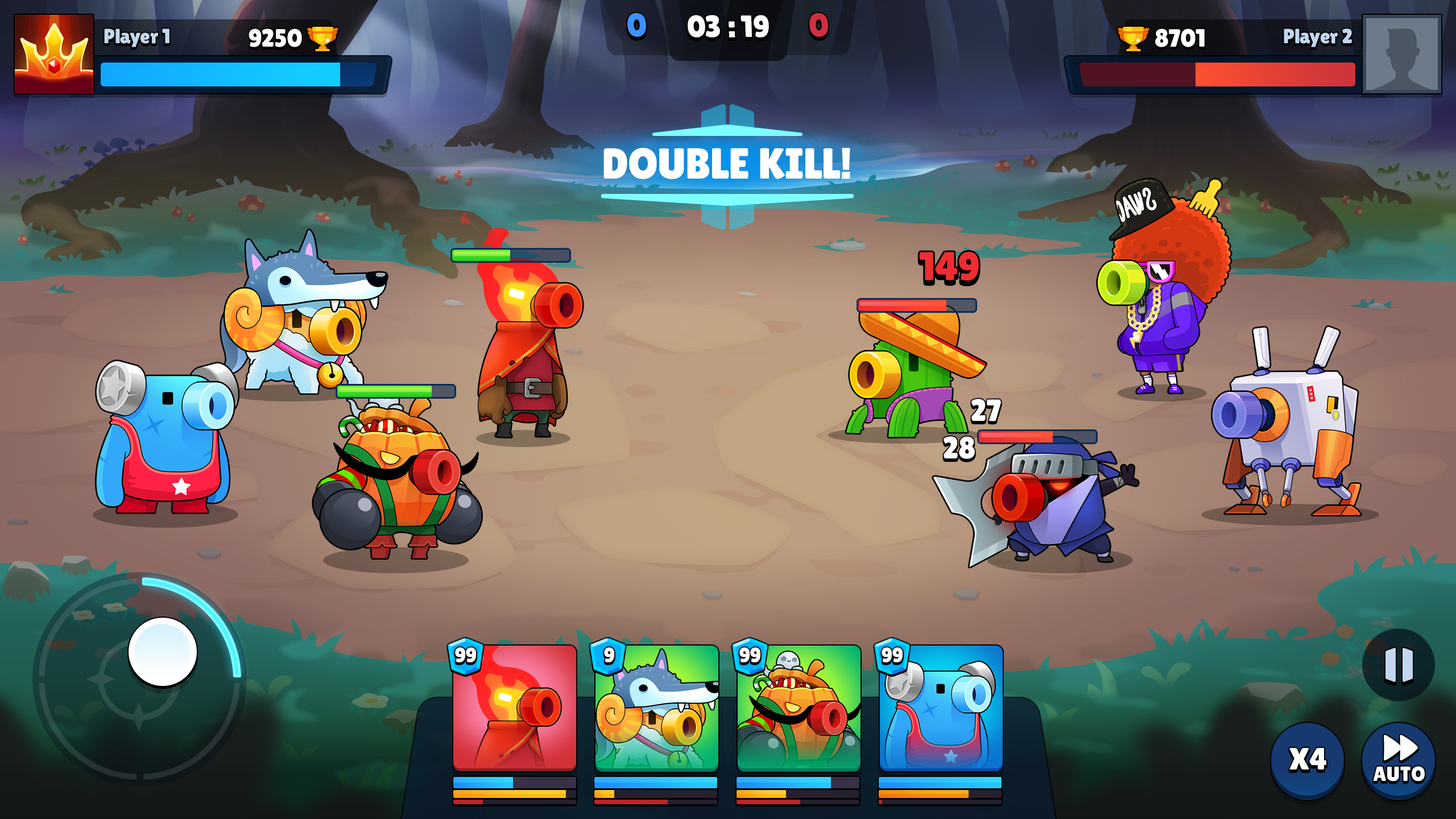
<style>
.page{position:relative;width:1456px;height:819px}
.page>*{position:absolute;margin:0}
.t1{font:33px "LilitaOne";color:#3c91fc;text-transform:uppercase}
.t2{font:30.7px "LilitaOne";color:#ffffff;text-transform:uppercase}
.t3{font:33px "LilitaOne";color:#d12e41;text-transform:uppercase}
.t4{font:20.5px "LilitaOne";color:#c3d7ef}
.t5{font:25px "LilitaOne";color:#ffffff}
.t6{font:43.2px "LilitaOne";color:#ffffff;text-transform:uppercase}
.t7{font:39.8px "LilitaOne";color:#ef2d31}
.t8{font:30.7px "LilitaOne";color:#ffffff}
.t9{font:20.5px "LilitaOne";color:#ffffff;text-transform:uppercase}
.t10{font:20.5px "LilitaOne";color:#ffffff}
</style>
<div class="page">
<p class="t1" style="left:627px;top:13px;width:19px;height:24px">0</p>
<p class="t2" style="left:688px;top:15px;width:81px;height:23px">03 : 19</p>
<p class="t3" style="left:809px;top:13px;width:19px;height:24px">0</p>
<p class="t4" style="left:104px;top:28px;width:65px;height:19px">Player 1</p>
<p class="t5" style="left:249px;top:28px;width:53px;height:19px">9250</p>
<p class="t5" style="left:1155px;top:28px;width:50px;height:19px">8701</p>
<p class="t4" style="left:1284px;top:28px;width:68px;height:19px">Player 2</p>
<p class="t6" style="left:603px;top:148px;width:247px;height:31px">Double kill!</p>
<p class="t7" style="left:919px;top:251px;width:60px;height:30px">149</p>
<p class="t8" style="left:971px;top:399px;width:30px;height:22px">27</p>
<p class="t8" style="left:944px;top:436px;width:31px;height:23px">28</p>
<p class="t9" style="left:455px;top:647px;width:21px;height:16px">99</p>
<p class="t9" style="left:604px;top:647px;width:10px;height:16px">9</p>
<p class="t9" style="left:739px;top:647px;width:21px;height:16px">99</p>
<p class="t9" style="left:882px;top:647px;width:21px;height:16px">99</p>
<p class="t2" style="left:1289px;top:748px;width:37px;height:22px">x4</p>
<p class="t10" style="left:1373px;top:766px;width:52px;height:15px">AUTO</p>
</div>
